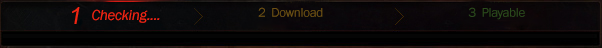
<style>
.page{position:relative;width:602px;height:48px}
.page>*{position:absolute;margin:0}
.t1{font:15px "FranklinGothic-BookItalic";letter-spacing:-0.025em;color:#f02513}
.t2{font:13px "FranklinGothic-Book";letter-spacing:-0.025em;color:#6c5013}
.t3{font:13px "FranklinGothic-Book";letter-spacing:-0.025em;color:#2b4a1c}
</style>
<div class="page">
<p class="t1" style="left:92px;top:9px;width:68px;height:14px">Checking....</p>
<p class="t2" style="left:258px;top:7px;width:65px;height:10px">2  Download</p>
<p class="t3" style="left:468px;top:7px;width:57px;height:13px">3  Playable</p>
</div>
